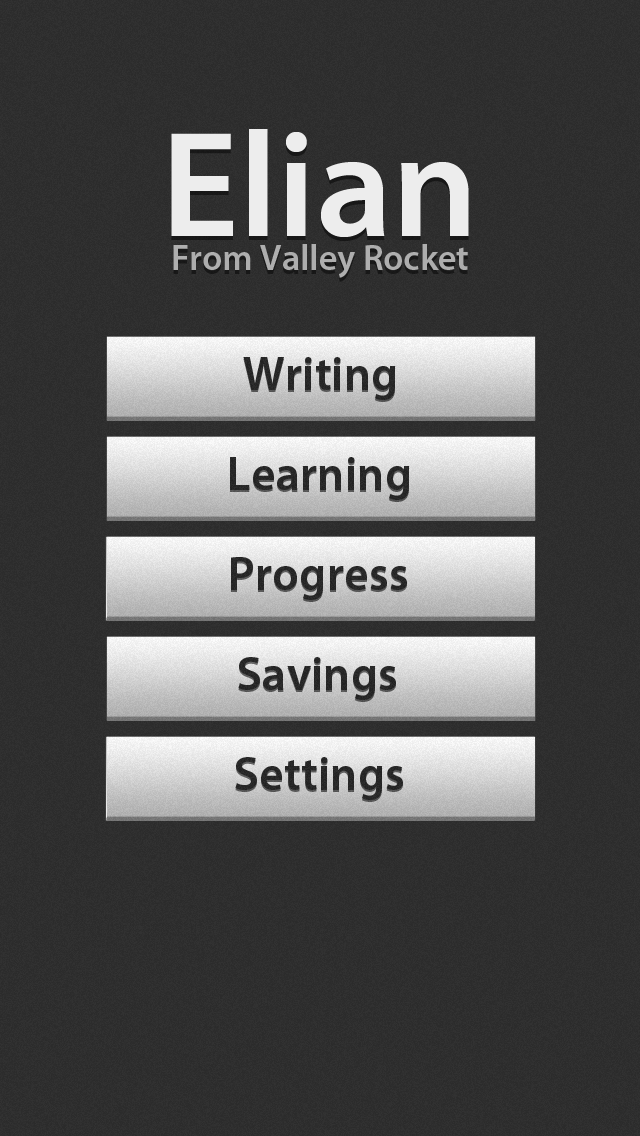
<style>
.page{position:relative;width:640px;height:1136px}
.page>*{position:absolute;margin:0}
.t1{font:150.7px "MyriadPro-Semibold";color:#ededed}
.t2{font:36px "MyriadPro-Semibold";color:#aeaeae}
.t3{font:48px "MyriadPro-Semibold";color:#232323}
</style>
<div class="page">
<p class="t1" style="left:171px;top:129px;width:298px;height:108px">Elian</p>
<p class="t2" style="left:173px;top:244px;width:295px;height:34px">From Valley Rocket</p>
<p class="t3" style="left:243px;top:357px;width:153px;height:43px">Writing</p>
<p class="t3" style="left:230px;top:457px;width:180px;height:43px">Learning</p>
<p class="t3" style="left:231px;top:557px;width:176px;height:43px">Progress</p>
<p class="t3" style="left:238px;top:657px;width:158px;height:43px">Savings</p>
<p class="t3" style="left:235px;top:757px;width:168px;height:43px">Settings</p>
</div>
